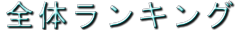
<style>
.page{position:relative;width:238px;height:30px;background:#ffffff}
.page>*{position:absolute;margin:0}
.t1{font:30px "MS-Gothic";letter-spacing:0.11em}
</style>
<div class="page">
<p class="t1" style="left:6px;top:0px;width:227px;height:29px">全体ランキング</p>
<p class="t1" style="left:6px;top:0px;width:227px;height:29px">全体ランキング</p>
</div>
